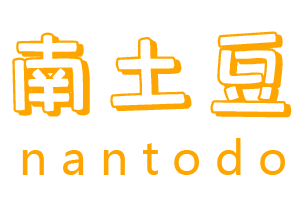
<style>
.page{position:relative;width:300px;height:200px;background:#ffffff}
.page>*{position:absolute;margin:0}
.t1{font:100px "baotuxiaobaiti";color:#ffa500}
.t2{font:45.8px "MicrosoftYaHei";color:#ffa500}
</style>
<div class="page">
<p class="t1" style="left:12px;top:31px;width:280px;height:87px">南土豆</p>
<p class="t2" style="left:22px;top:138px;width:263px;height:37px">n a n t o d o</p>
</div>
